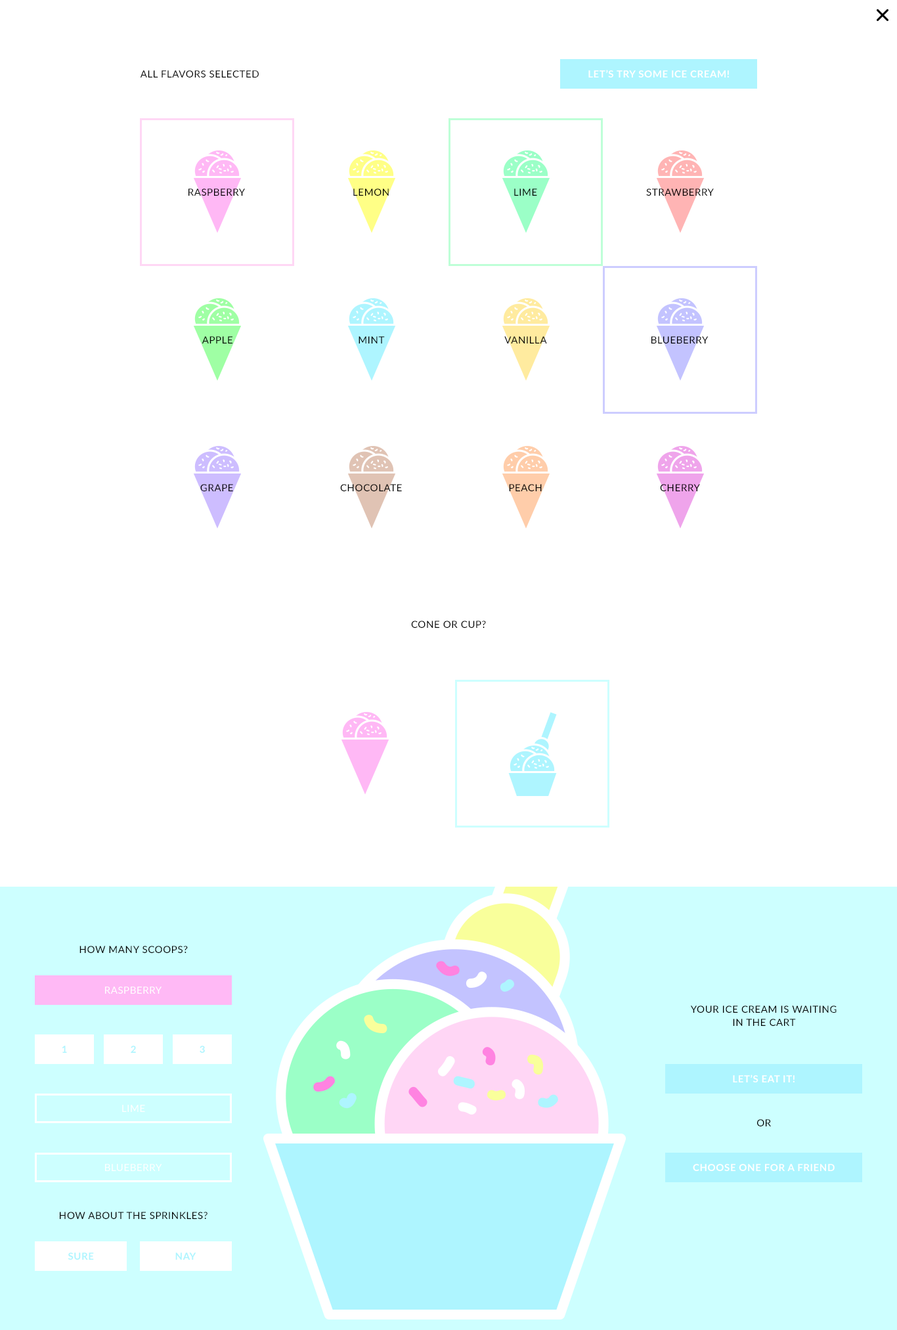
<style>
.page{position:relative;width:897px;height:1330px;background:#ffffff}
.page>*{position:absolute;margin:0}
.t1{font:9.8px "Lato-Regular";letter-spacing:0.04em;color:#000000;text-transform:uppercase}
.t2{font:9.8px "Lato-Bold";letter-spacing:0.04em;color:#ffffff;text-transform:uppercase}
.t3{font:9.8px "Lato-Regular";letter-spacing:0.04em;color:#ffffff;text-transform:uppercase}
.t4{font:9.8px/13.1px "Lato-Regular";letter-spacing:0.04em;color:#000000;text-transform:uppercase}
.t5{font:9.8px "Lato-Bold";letter-spacing:0.04em;color:#aef5ff;text-transform:uppercase}
</style>
<div class="page">
<p class="t1" style="left:140px;top:70px;width:119px;height:7px">all flavors selected</p>
<p class="t2" style="left:588px;top:70px;width:141px;height:7px">let’s try some ice cream!</p>
<p class="t1" style="left:188px;top:188px;width:57px;height:8px">raspberry</p>
<p class="t1" style="left:353px;top:188px;width:36px;height:8px">lemon</p>
<p class="t1" style="left:514px;top:188px;width:23px;height:8px">lime</p>
<p class="t1" style="left:646px;top:188px;width:68px;height:8px">strawberry</p>
<p class="t1" style="left:202px;top:336px;width:30px;height:7px">apple</p>
<p class="t1" style="left:358px;top:336px;width:27px;height:7px">mint</p>
<p class="t1" style="left:504px;top:336px;width:43px;height:7px">vanilla</p>
<p class="t1" style="left:651px;top:336px;width:57px;height:7px">blueberry</p>
<p class="t1" style="left:200px;top:484px;width:33px;height:7px">grape</p>
<p class="t1" style="left:340px;top:484px;width:62px;height:7px">chocolate</p>
<p class="t1" style="left:509px;top:484px;width:33px;height:7px">peach</p>
<p class="t1" style="left:660px;top:484px;width:40px;height:7px">cherry</p>
<p class="t1" style="left:411px;top:620px;width:75px;height:8px">cone or cup?</p>
<p class="t1" style="left:79px;top:945px;width:109px;height:8px">How many scoops?</p>
<p class="t3" style="left:105px;top:986px;width:57px;height:7px">raspberry</p>
<p class="t4" style="left:690px;top:1005px;width:146px;height:21px;text-align:center">your ice cream is waiting<br>in the cart</p>
<p class="t5" style="left:62px;top:1045px;width:5px;height:7px">1</p>
<p class="t5" style="left:131px;top:1045px;width:5px;height:7px">2</p>
<p class="t5" style="left:200px;top:1045px;width:5px;height:7px">3</p>
<p class="t2" style="left:733px;top:1074px;width:61px;height:8px">let’s eat it!</p>
<p class="t3" style="left:122px;top:1104px;width:23px;height:8px">lime</p>
<p class="t1" style="left:757px;top:1119px;width:14px;height:7px">or</p>
<p class="t3" style="left:105px;top:1163px;width:57px;height:8px">blueberry</p>
<p class="t2" style="left:693px;top:1163px;width:141px;height:8px">choose one for a friend</p>
<p class="t1" style="left:60px;top:1211px;width:147px;height:8px">how about the sprinkles?</p>
<p class="t5" style="left:68px;top:1252px;width:26px;height:7px">Sure</p>
<p class="t5" style="left:175px;top:1252px;width:21px;height:7px">nay</p>
</div>
